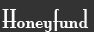
<style>
.page{position:relative;width:94px;height:32px;background:#333333}
.page>*{position:absolute;margin:0}
.t1{font:24px "MonaLisaSolidITCTT";color:#fefefe}
</style>
<div class="page">
<p class="t1" style="left:2px;top:9px;width:87px;height:23px">Honeyfund</p>
</div>
